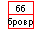
<style>
.page{position:relative;width:42px;height:31px;background:#ffffff}
.page>*{position:absolute;margin:0}
.t1{font:8.5px "ArialMT";color:#030000}
</style>
<div class="page">
<p class="t1" style="left:16px;top:5px;width:9px;height:7px">бб</p>
<p class="t1" style="left:8px;top:18px;width:25px;height:9px">бровр</p>
</div>
